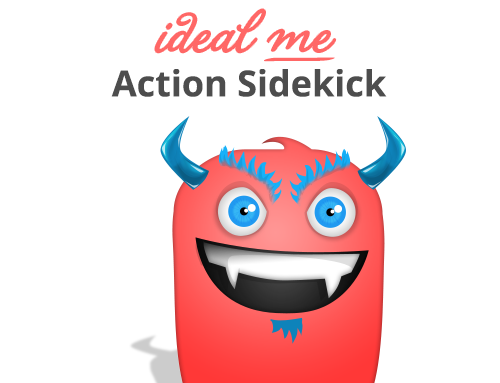
<style>
.page{position:relative;width:500px;height:383px;background:#ffffff}
.page>*{position:absolute;margin:0}
.t1{font:60px "LaPorteniadelaBoca";color:#ff6766}
.t2{font:60px "LaPorteniadelaRecoleta";color:#ff6766}
.t3{font:83.5px "LaPorteniadelaBoca";color:#ff6766;scale:2.3 1}
.t4{font:36px "OpenSans-Bold";color:#4d4d4d}
</style>
<div class="page">
<p class="t1" style="left:155px;top:9px;width:181px;height:44px">i<span class="t2">d</span>eal me</p>
<p class="t3" style="left:264px;top:57px;width:71px;height:5px">_</p>
<p class="t4" style="left:111px;top:69px;width:276px;height:28px">Action Sidekick</p>
</div>
